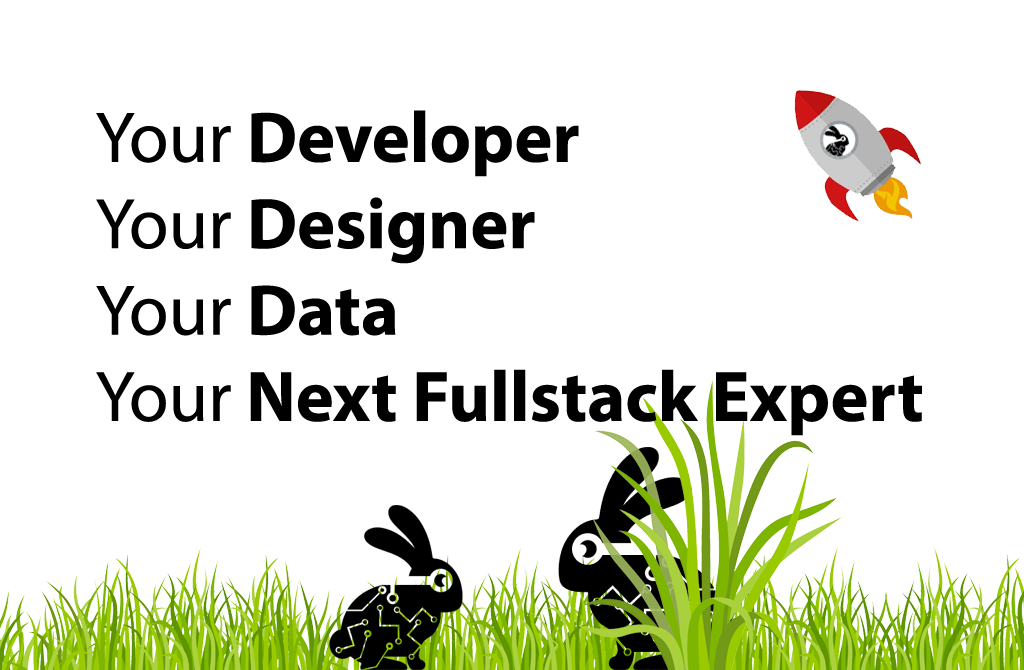
<style>
.page{position:relative;width:1024px;height:670px;background:#ffffff}
.page>*{position:absolute;margin:0}
.t1{font:72px "MyriadPro-Bold";color:#000000}
.t2{font:72px "MyriadPro-Regular";color:#000000}
</style>
<div class="page">
<p class="t1" style="left:96px;top:110px;width:826px;height:326px"><span class="t2">Your </span>Developer<br><span class="t2">Your </span>Designer<br><span class="t2">Your </span>Data<br><span class="t2">Your</span> Next Fullstack Expert</p>
</div>
